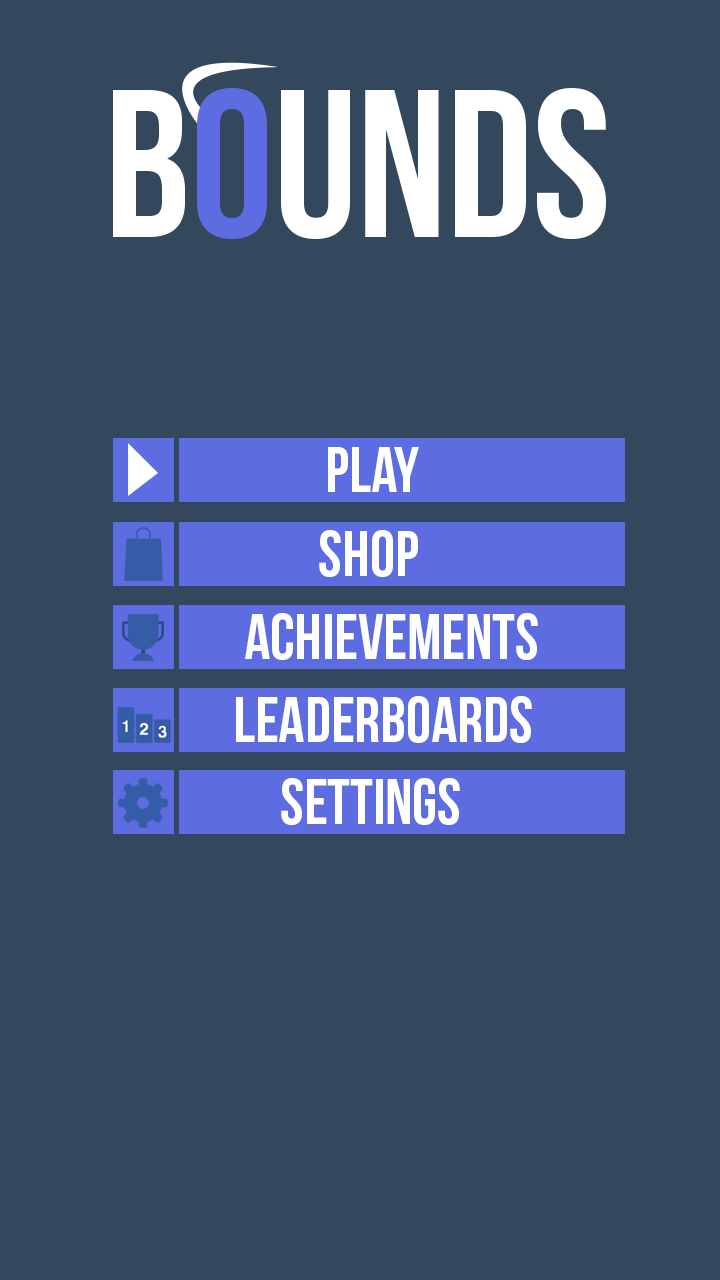
<style>
.page{position:relative;width:720px;height:1280px;background:#33485d}
.page>*{position:absolute;margin:0}
.t1{font:64px "BebasNeue";color:#ffffff}
</style>
<div class="page">
<p class="t1" style="left:328px;top:447px;width:91px;height:45px">PLAY</p>
<p class="t1" style="left:319px;top:530px;width:99px;height:47px">Shop</p>
<p class="t1" style="left:245px;top:613px;width:293px;height:47px">achievements</p>
<p class="t1" style="left:236px;top:696px;width:296px;height:47px">LEADERBOARDS</p>
<p class="t1" style="left:281px;top:778px;width:179px;height:47px">SETTINGS</p>
</div>
